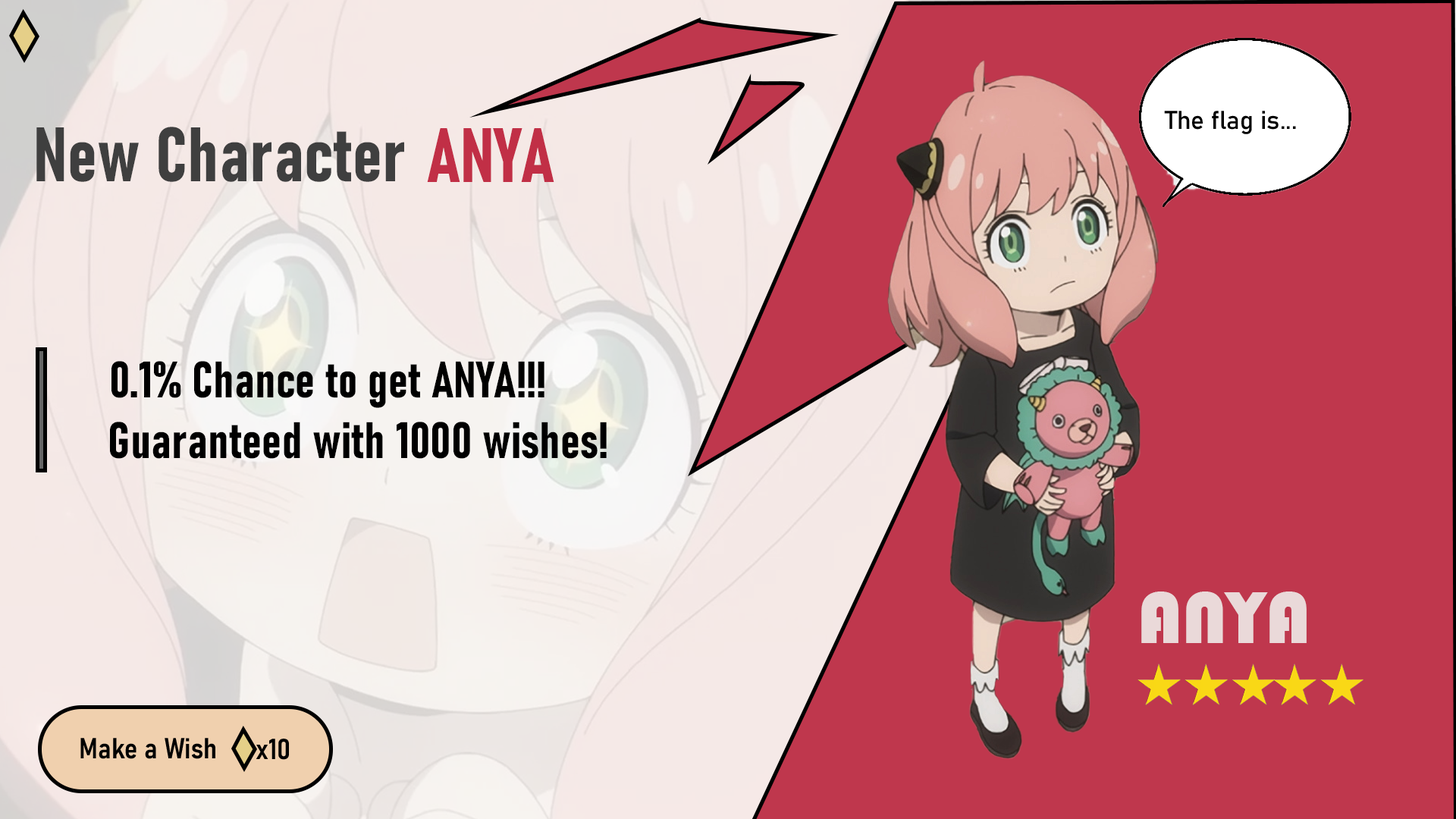
<style>
.page{position:relative;width:1456px;height:819px;background:#bf374d}
.page>*{position:absolute;margin:0}
.t1{font:75.8px "Bahnschrift-BoldCondensed";color:#3f3f3f}
.t2{font:75.8px "Bahnschrift-BoldCondensed";color:#c12f46}
.t3{font:50.6px "Bahnschrift-BoldCondensed";color:#000000}
.t4{font:75.8px "Bauhaus93";color:#ead9d9}
</style>
<div class="page">
<p class="t1" style="left:36px;top:127px;width:368px;height:55px">New Character</p>
<p class="t2" style="left:427px;top:128px;width:127px;height:54px">ANYA</p>
<p class="t3" style="left:110px;top:361px;width:497px;height:98px;text-align:center">0.1% Chance to get ANYA!!!<br>      Guaranteed with 1000 wishes!</p>
<p class="t4" style="left:1141px;top:591px;width:166px;height:52px">ANYA</p>
</div>
